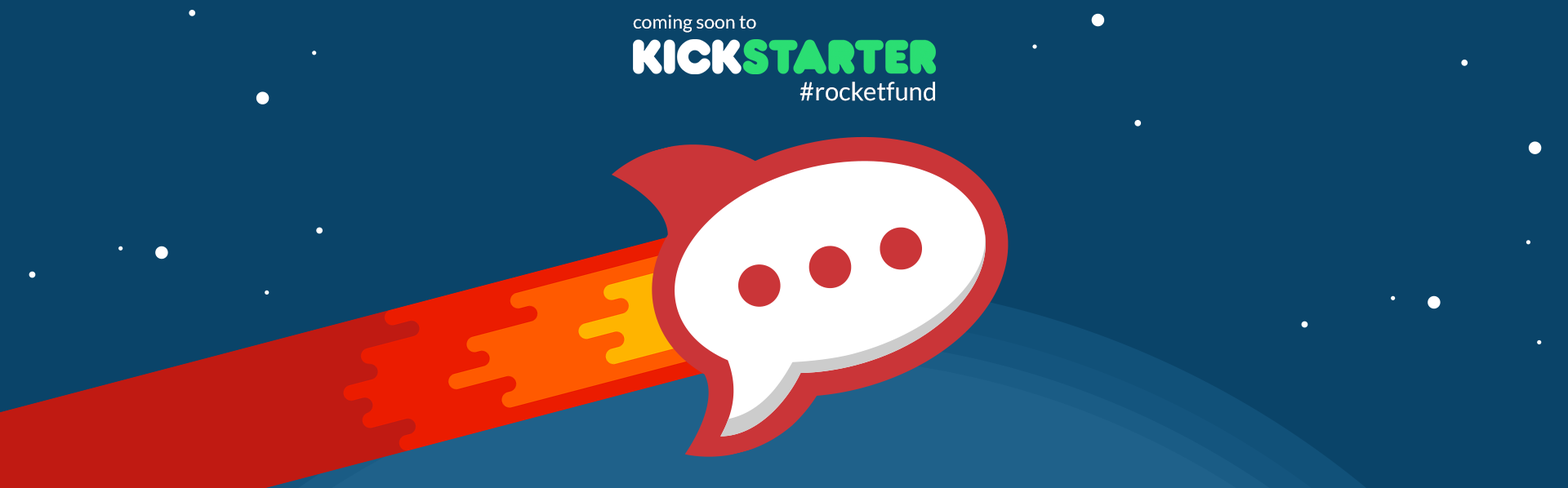
<style>
.page{position:relative;width:1568px;height:488px;background:#0a4469}
.page>*{position:absolute;margin:0}
.t1{font:18.7px "Lato-Regular";color:#ffffff}
.t2{font:25.3px "Lato-Regular";color:#ffffff}
</style>
<div class="page">
<p class="t1" style="left:633px;top:15px;width:123px;height:18px">coming soon to</p>
<p class="t2" style="left:800px;top:82px;width:135px;height:19px">#rocketfund</p>
</div>
